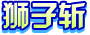
<style>
.page{position:relative;width:90px;height:35px}
.page>*{position:absolute;margin:0}
.t1{font:28px "HYk2gj"}
</style>
<div class="page">
<p class="t1" style="left:3px;top:2px;width:82px;height:27px">狮子斩</p>
</div>
